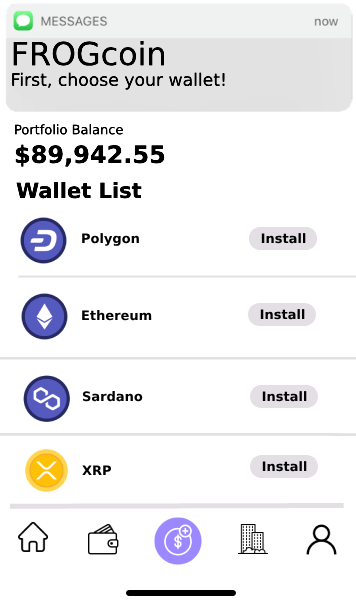
<style>
.page{position:relative;width:356px;height:606px;background:#ffffff}
.page>*{position:absolute;margin:0}
.t1{font:17.2px "DejaVuSans";color:#000000}
.t2{font:31.8px "DejaVuSans";color:#000000}
.t3{font:13px "DejaVuSans";color:#000000}
.t4{font:24px "DejaVuSans-Bold";color:#000000}
.t5{font:21px "DejaVuSans-Bold";color:#000000}
.t6{font:13px "DejaVuSans-Bold";color:#000000}
</style>
<div class="page">
<p class="t1" style="left:12px;top:41px;width:213px;height:49px"><span class="t2">FROGcoin<br></span>First, choose your wallet!</p>
<p class="t3" style="left:15px;top:124px;width:150px;height:43px">Portfolio Balance<br><span class="t4">$89,942.55</span></p>
<p class="t5" style="left:16px;top:182px;width:126px;height:17px">Wallet List</p>
<p class="t6" style="left:82px;top:233px;width:57px;height:13px">Polygon</p>
<p class="t6" style="left:82px;top:310px;width:70px;height:11px">Ethereum</p>
<p class="t6" style="left:82px;top:391px;width:61px;height:11px">Sardano</p>
<p class="t6" style="left:82px;top:465px;width:30px;height:10px">XRP</p>
</div>
